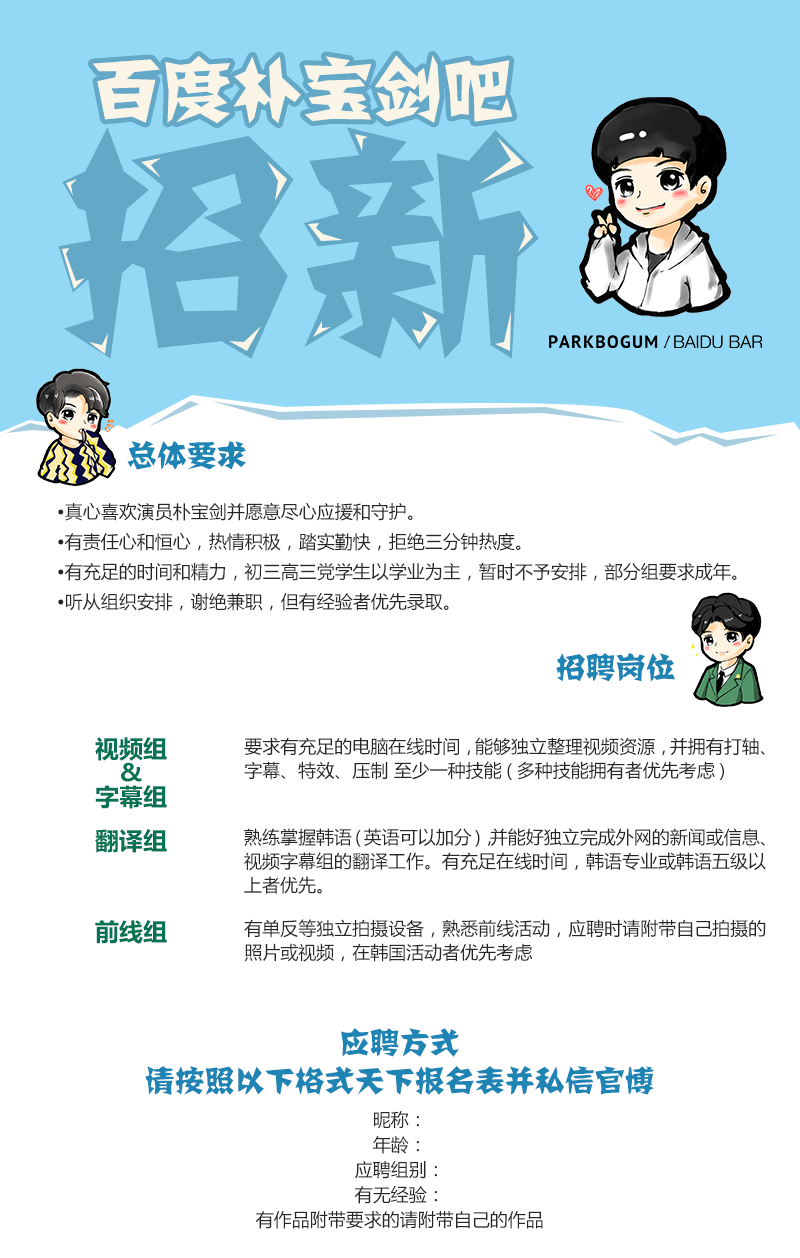
<style>
.page{position:relative;width:800px;height:1258px;background:#ffffff}
.page>*{position:absolute;margin:0}
.t1{font:70.5px "FZJZJW--GB1-0";color:#fbf5e7;text-transform:uppercase}
.t2{font:245.2px "FZJZJW--GB1-0";color:#63a8c7;text-transform:uppercase}
.t3{font:30px "FZJZJW--GB1-0";color:#1d84b3;text-transform:uppercase}
.t4{font:18px/30px "MicrosoftYaHei";color:#262626;text-transform:uppercase}
.t5{font:24px/24px "MicrosoftYaHei-Bold";color:#057354;text-transform:uppercase}
.t6{font:18px/24px "MicrosoftYaHei";color:#262626;text-transform:uppercase}
.t7{font:24px "MicrosoftYaHei-Bold";color:#057354;text-transform:uppercase}
.t8{font:30px/38px "FZJZJW--GB1-0";color:#1d84b3;text-transform:uppercase}
.t9{font:18px/25px "MicrosoftYaHei";color:#262626;text-transform:uppercase}
</style>
<div class="page">
<p class="t1" style="left:92px;top:55px;width:421px;height:69px">百度朴宝剑吧</p>
<p class="t2" style="left:58px;top:127px;width:481px;height:232px">招新</p>
<p class="t3" style="left:127px;top:440px;width:119px;height:30px">总体要求</p>
<p class="t4" style="left:58px;top:502px;width:679px;height:109px">•真心喜欢演员朴宝剑并愿意尽心应援和守护。<br>•有责任心和恒心，热情积极，踏实勤快，拒绝三分钟热度。<br>•有充足的时间和精力，初三高三党学生以学业为主，暂时不予安排，部分组要求成年。<br>•听从组织安排，谢绝兼职，但有经验者优先录取。</p>
<p class="t3" style="left:556px;top:653px;width:119px;height:29px">招聘岗位</p>
<p class="t5" style="left:95px;top:737px;width:72px;height:72px;text-align:center">视频组<br>&amp;<br>字幕组</p>
<p class="t6" style="left:244px;top:737px;width:521px;height:43px">要求有充足的电脑在线时间，能够独立整理视频资源，并拥有打轴、字幕、特效、压制 至少一种技能(多种技能拥有者优先考虑)</p>
<p class="t7" style="left:95px;top:829px;width:72px;height:24px">翻译组</p>
<p class="t6" style="left:244px;top:828px;width:522px;height:66px">熟练掌握韩语(英语可以加分)，并能好独立完成外网的新闻或信息、视频字幕组的翻译工作。有充足在线时间，韩语专业或韩语五级以上者优先。</p>
<p class="t7" style="left:95px;top:920px;width:72px;height:24px">前线组</p>
<p class="t6" style="left:244px;top:919px;width:522px;height:43px">有单反等独立拍摄设备，熟悉前线活动，应聘时请附带自己拍摄的照片或视频，在韩国活动者优先考虑</p>
<p class="t8" style="left:145px;top:1028px;width:509px;height:67px;text-align:center">应聘方式<br>请按照以下格式天下报名表并私信官博</p>
<p class="t9" style="left:255px;top:1110px;width:288px;height:119px;text-align:center">昵称：<br>年龄：<br>应聘组别：<br>有无经验：<br>有作品附带要求的请附带自己的作品</p>
</div>
